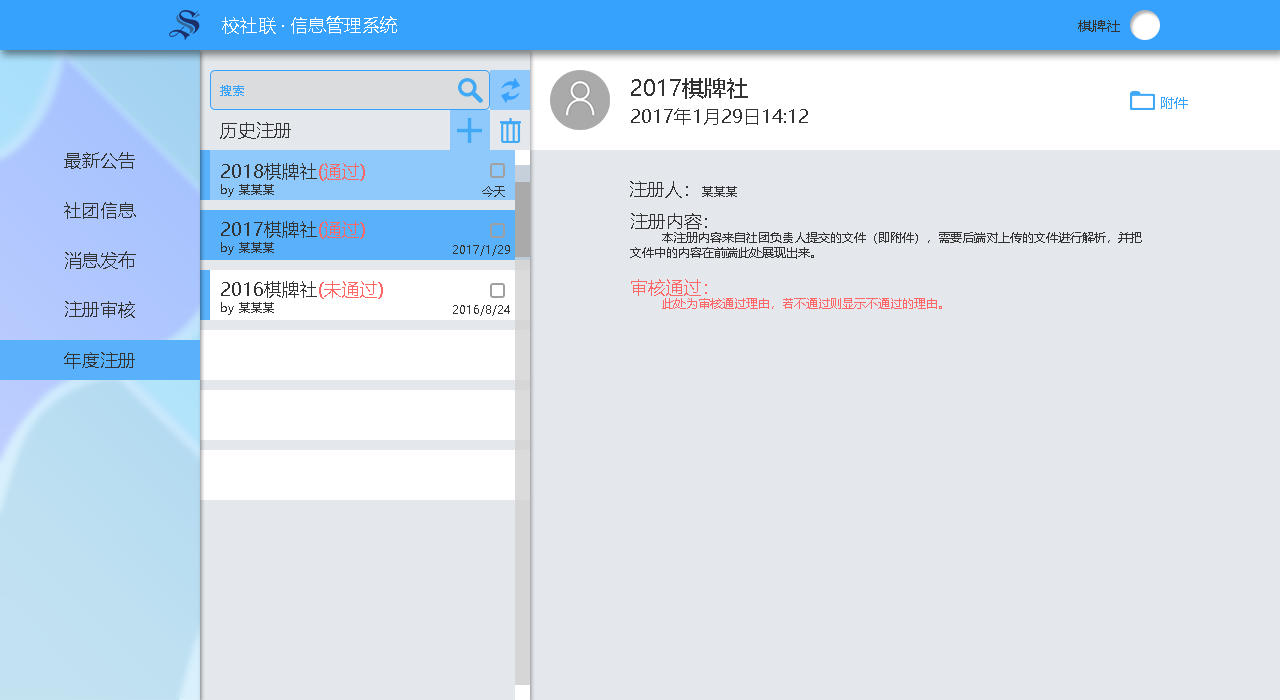
<style>
.page{position:relative;width:1280px;height:700px;background:#e4e8ec}
.page>*{position:absolute;margin:0}
.t1{font:18px "MicrosoftYaHei";color:#ffffff}
.t2{font:14px "MicrosoftYaHei";color:#333333}
.t3{font:22px "MicrosoftYaHei";color:#333333}
.t4{font:12px "MicrosoftYaHei";color:#37a2fe}
.t5{font:14px "MicrosoftYaHei";color:#37a2fe}
.t6{font:18px "MicrosoftYaHei";color:#333333}
.t7{font:18px "MicrosoftYaHei";color:#ff6666}
.t8{font:12px "MicrosoftYaHei";color:#333333}
.t9{font:12px "MicrosoftYaHei";color:#ff6666}
</style>
<div class="page">
<p class="t1" style="left:222px;top:16px;width:175px;height:18px">校社联 · 信息管理系统</p>
<p class="t2" style="left:1078px;top:20px;width:42px;height:12px">棋牌社</p>
<p class="t3" style="left:631px;top:78px;width:117px;height:21px">2017棋牌社</p>
<p class="t4" style="left:220px;top:85px;width:24px;height:11px">搜索</p>
<p class="t5" style="left:1161px;top:97px;width:27px;height:12px">附件</p>
<p class="t6" style="left:631px;top:108px;width:177px;height:17px">2017年1月29日14:12</p>
<p class="t6" style="left:220px;top:122px;width:71px;height:17px">历史注册</p>
<p class="t6" style="left:64px;top:152px;width:71px;height:17px">最新公告</p>
<p class="t6" style="left:221px;top:163px;width:144px;height:18px">2018棋牌社<span class="t7">(通过)</span></p>
<p class="t8" style="left:221px;top:184px;width:53px;height:13px">by 某某某</p>
<p class="t6" style="left:630px;top:181px;width:107px;height:17px">注册人：<span class="t8">某某某</span></p>
<p class="t8" style="left:482px;top:186px;width:23px;height:11px">今天</p>
<p class="t6" style="left:64px;top:202px;width:72px;height:17px">社团信息</p>
<p class="t6" style="left:221px;top:221px;width:144px;height:18px">2017棋牌社<span class="t7">(通过)</span></p>
<p class="t8" style="left:630px;top:213px;width:512px;height:46px"><span class="t6">注册内容：</span><br>        本注册内容来自社团负责人提交的文件（即附件），需要后端对上传的文件进行解析，并把<br>文件中的内容在前端此处展现出来。</p>
<p class="t8" style="left:221px;top:242px;width:53px;height:13px">by 某某某</p>
<p class="t8" style="left:453px;top:245px;width:57px;height:11px">2017/1/29</p>
<p class="t6" style="left:65px;top:251px;width:71px;height:18px">消息发布</p>
<p class="t6" style="left:221px;top:281px;width:162px;height:18px">2016棋牌社<span class="t7">(未通过)</span></p>
<p class="t9" style="left:631px;top:279px;width:311px;height:30px"><span class="t7">审核通过：</span><br>        此处为审核通过理由，若不通过则显示不通过的理由。</p>
<p class="t6" style="left:65px;top:301px;width:70px;height:17px">注册审核</p>
<p class="t8" style="left:221px;top:302px;width:53px;height:13px">by 某某某</p>
<p class="t8" style="left:453px;top:305px;width:57px;height:11px">2016/8/24</p>
<p class="t6" style="left:64px;top:352px;width:71px;height:17px">年度注册</p>
</div>
